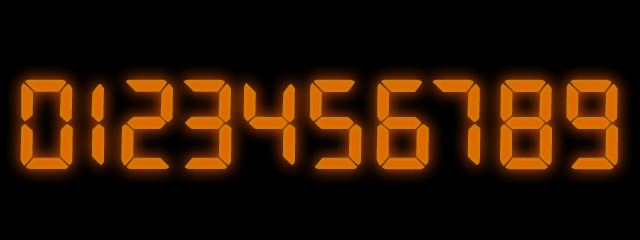
<style>
.page{position:relative;width:640px;height:240px;background:#000000}
.page>*{position:absolute;margin:0}
.t1{font:120.2px "LiquidCrystal";letter-spacing:0.05em;color:#df6900}
</style>
<div class="page">
<p class="t1" style="left:20px;top:79px;width:598px;height:91px">0123456789</p>
</div>
